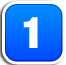
<style>
.page{position:relative;width:66px;height:65px}
.page>*{position:absolute;margin:0}
.t1{font:42px "AcmoDisplaySSiNormal";color:#ffffff}
</style>
<div class="page">
<p class="t1" style="left:23px;top:17px;width:15px;height:31px">1</p>
</div>
